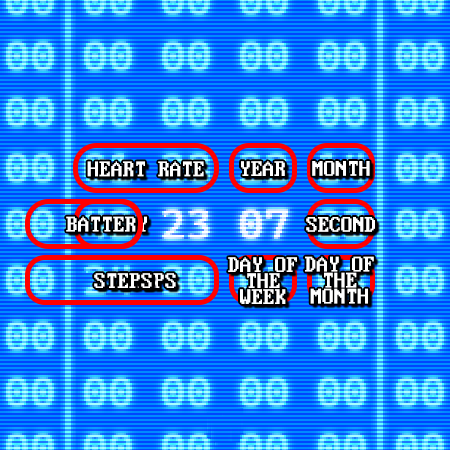
<style>
.page{position:relative;width:450px;height:450px}
.page>*{position:absolute;margin:0}
.t1{font:30px "ClassicConsole";color:#ffffff}
.t2{font:30px/16px "ClassicConsole";color:#ffffff}
.t3{font:30px "ClassicConsole"}
</style>
<div class="page">
<p class="t1" style="left:87px;top:161px;width:117px;height:16px">HEART RATE</p>
<p class="t1" style="left:241px;top:161px;width:44px;height:15px">YEAR</p>
<p class="t1" style="left:312px;top:161px;width:58px;height:15px">MONTH</p>
<p class="t1" style="left:66px;top:216px;width:81px;height:16px">BATTERY</p>
<p class="t1" style="left:306px;top:217px;width:69px;height:15px">SECOND</p>
<p class="t2" style="left:228px;top:257px;width:69px;height:47px;text-align:center">DAY OF<br>THE<br>WEEK</p>
<p class="t2" style="left:305px;top:256px;width:69px;height:48px;text-align:center">DAY OF<br>THE<br>MONTH</p>
<p class="t1" style="left:94px;top:273px;width:58px;height:15px">STEPS</p>
<p class="t3" style="left:118px;top:273px;width:58px;height:15px">STEPS</p>
</div>
